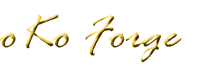
<style>
.page{position:relative;width:218px;height:71px;background:#ffffff}
.page>*{position:absolute;margin:0}
.t1{font:50px "RageItalic"}
</style>
<div class="page">
<p class="t1" style="left:0px;top:14px;width:182px;height:49px">oKo Forge</p>
</div>
